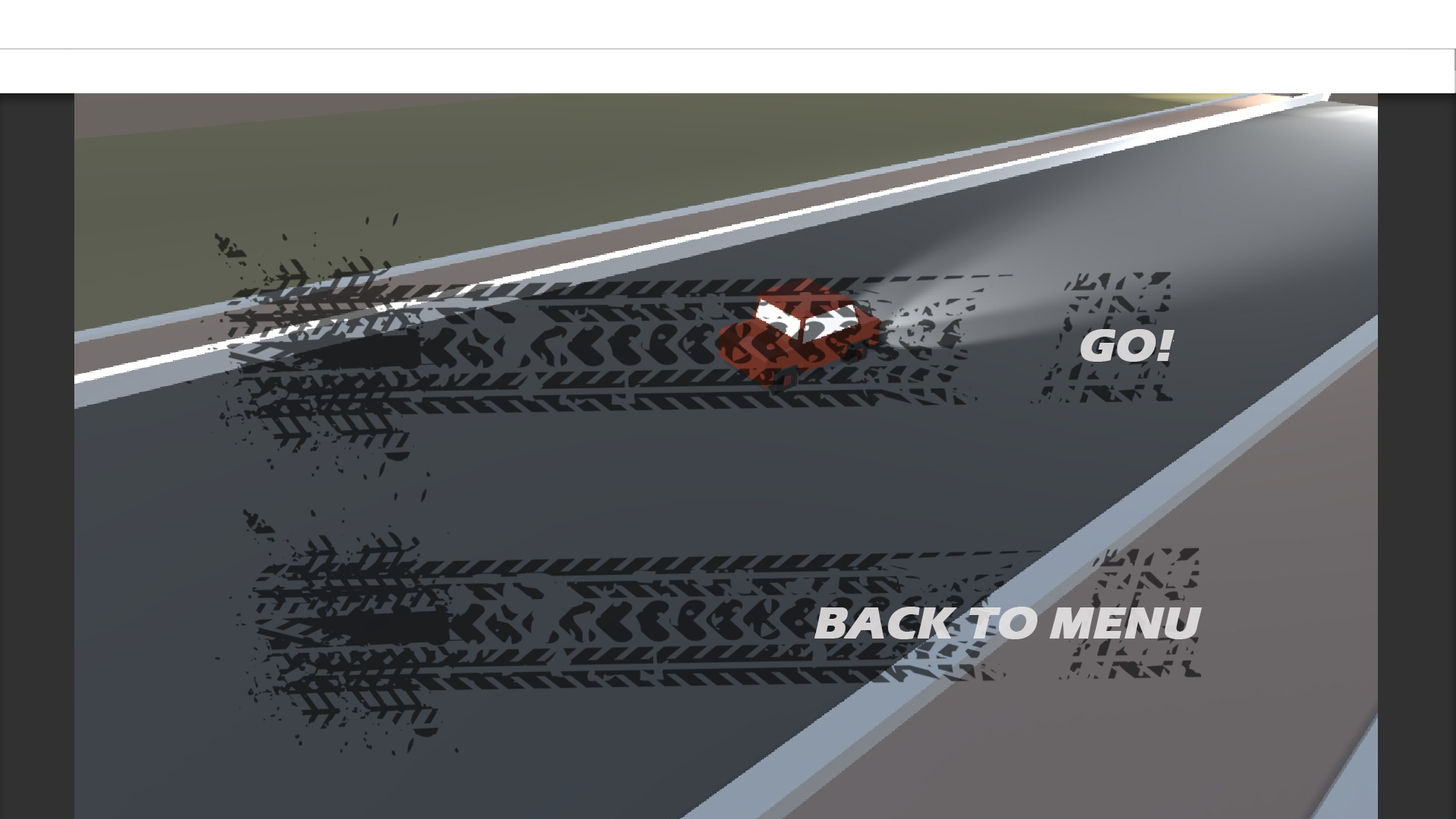
<style>
.page{position:relative;width:1456px;height:819px}
.page>*{position:absolute;margin:0}
.t1{font:45.5px "ErasITC-Bold";color:#edebeb;font-weight:bold;font-style:italic}
.t2{font:45.5px "ErasITC-Bold";color:#d9d7d7;font-weight:bold;font-style:italic}
</style>
<div class="page">
<p class="t1" style="left:1081px;top:329px;width:94px;height:33px;opacity:0.82">GO!</p>
<p class="t2" style="left:814px;top:607px;width:388px;height:32px">BACK TO MENU</p>
</div>
